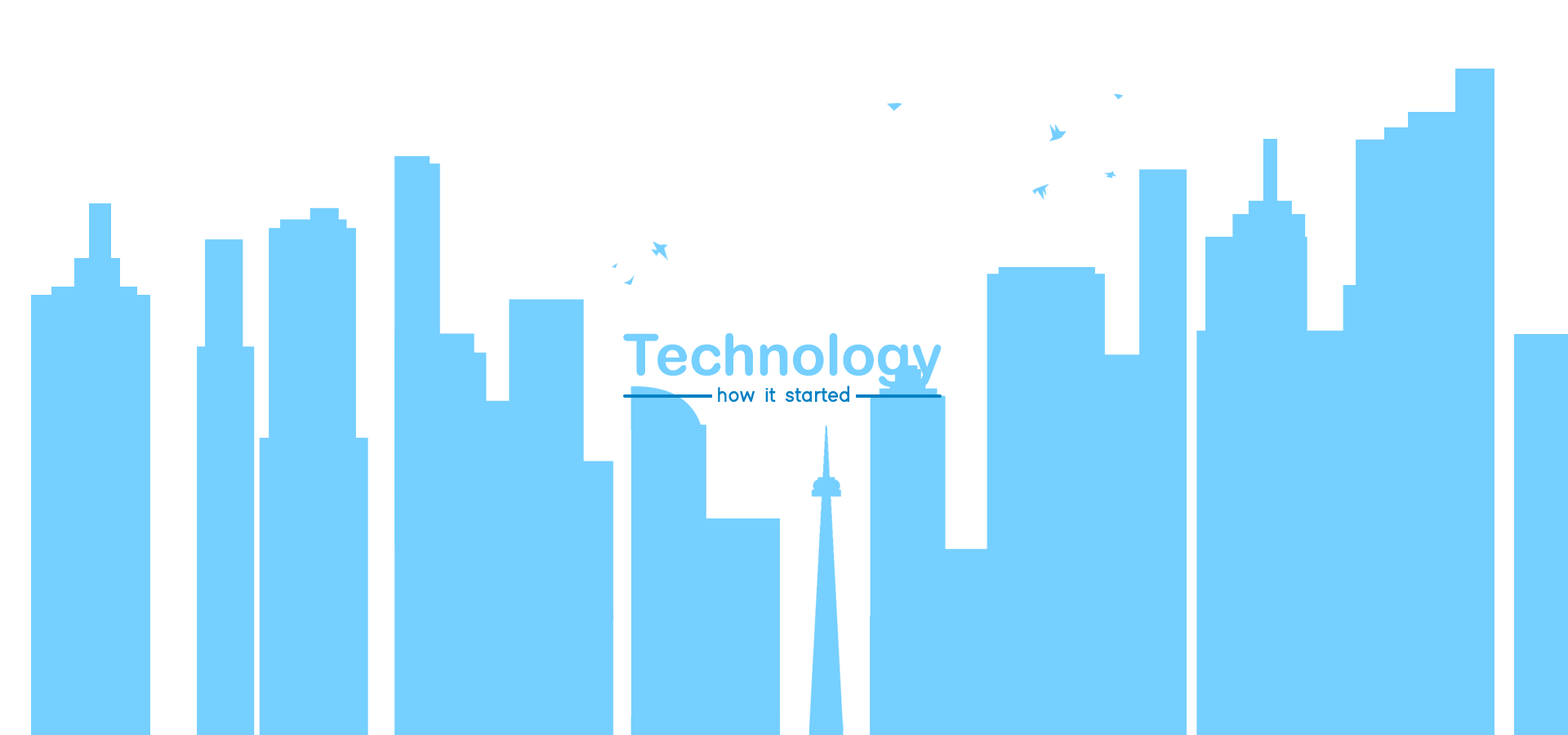
<style>
.page{position:relative;width:1568px;height:735px;background:#75cfff}
.page>*{position:absolute;margin:0}
.t1{font:57.2px "ArialRoundedMTBold";color:#75cfff}
.t2{font:21.8px "Adam-Bold";color:#0180c3}
</style>
<div class="page">
<p class="t1" style="left:623px;top:333px;width:319px;height:54px">Technology</p>
<p class="t2" style="left:718px;top:385px;width:131px;height:17px">how it started</p>
</div>
